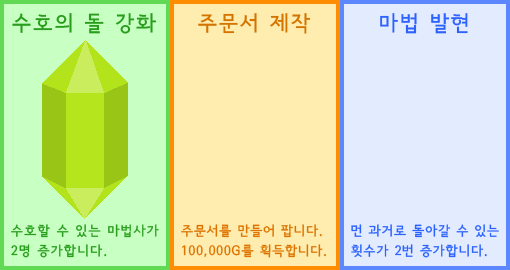
<style>
.page{position:relative;width:510px;height:270px;background:#ffedb0}
.page>*{position:absolute;margin:0}
.t1{font:21.3px "SeoulNamsanB";letter-spacing:0.1em;color:#289d1c}
.t2{font:21.3px "SeoulNamsanB";letter-spacing:0.1em;color:#d37400}
.t3{font:21.3px "SeoulNamsanB";letter-spacing:0.1em;color:#2c62fe}
.t4{font:13.3px/20px "SeoulNamsanB";letter-spacing:0.1em;color:#289d1c}
.t5{font:13.3px/20px "SeoulNamsanB";letter-spacing:0.07em;color:#dd7400}
.t6{font:13.3px/20px "SeoulNamsanB";letter-spacing:0.07em;color:#2c63ff}
</style>
<div class="page">
<p class="t1" style="left:12px;top:13px;width:145px;height:21px">수호의 돌 강화</p>
<p class="t2" style="left:198px;top:13px;width:113px;height:21px">주문서 제작</p>
<p class="t3" style="left:380px;top:13px;width:88px;height:21px">마법 발현</p>
<p class="t4" style="left:11px;top:224px;width:148px;height:34px">수호할 수 있는 마법사가 2명 증가합니다.</p>
<p class="t5" style="left:181px;top:224px;width:145px;height:34px">주문서를 만들어 팝니다. 100,000G를 획득합니다.</p>
<p class="t6" style="left:351px;top:224px;width:148px;height:34px">먼 과거로 돌아갈 수 있는 횟수가 2번 증가합니다.</p>
</div>
